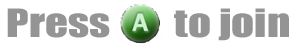
<style>
.page{position:relative;width:296px;height:48px;background:#ffffff}
.page>*{position:absolute;margin:0}
.t1{font:36px "Impact";color:#959494;scale:1.25 1}
</style>
<div class="page">
<p class="t1" style="left:7px;top:8px;width:282px;height:33px">Press        to join</p>
</div>
